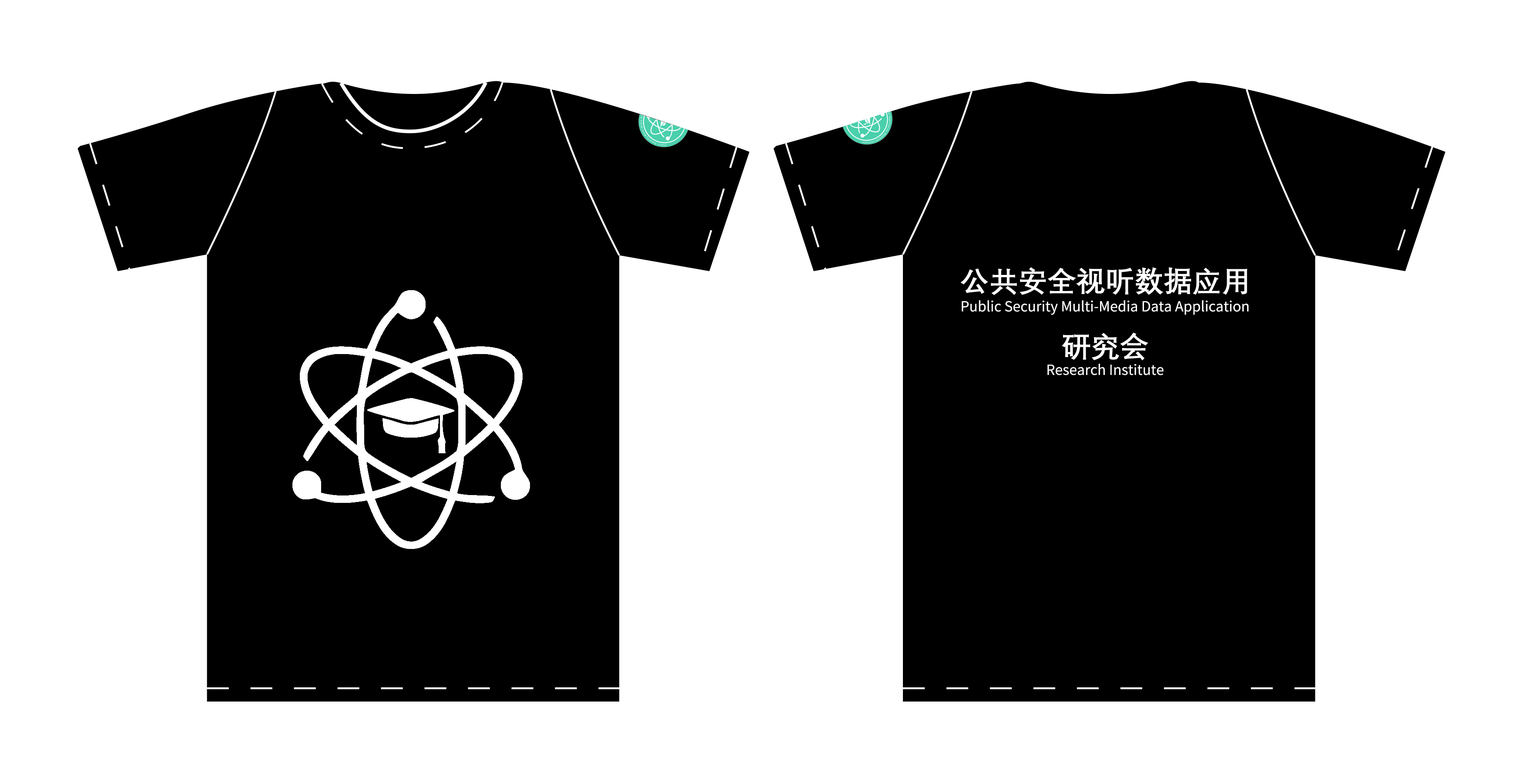
<style>
.page{position:relative;width:1523px;height:783px;background:#ffffff}
.page>*{position:absolute;margin:0}
.t1{font:29px/65.3px "DengXian-Bold";color:#ffffff}
.t2{font:14px/63.4px "NotoSansHans-Regular";color:#ffffff}
</style>
<div class="page">
<p class="t1" style="left:960px;top:267px;width:287px;height:94px;text-align:center">公共安全视听数据应用<br>研究会</p>
<p class="t2" style="left:961px;top:300px;width:288px;height:75px;text-align:center">Public Security Multi-Media Data Application<br>Research Institute</p>
</div>
